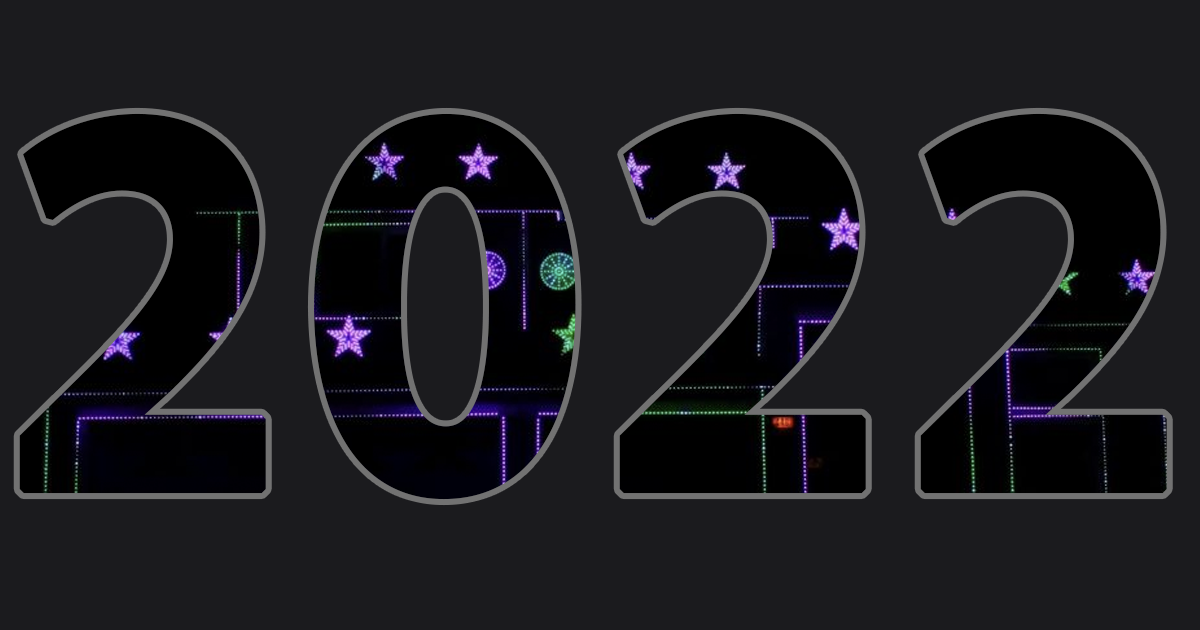
<style>
.page{position:relative;width:1200px;height:630px;background:#1b1b1e}
.page>*{position:absolute;margin:0}
.t1{font:561.3px "MyriadPro-Bold";color:#000000;font-weight:bold;scale:0.92 1}
</style>
<div class="page">
<p class="t1" style="left:19px;top:113px;width:1148px;height:387px">2022</p>
</div>
